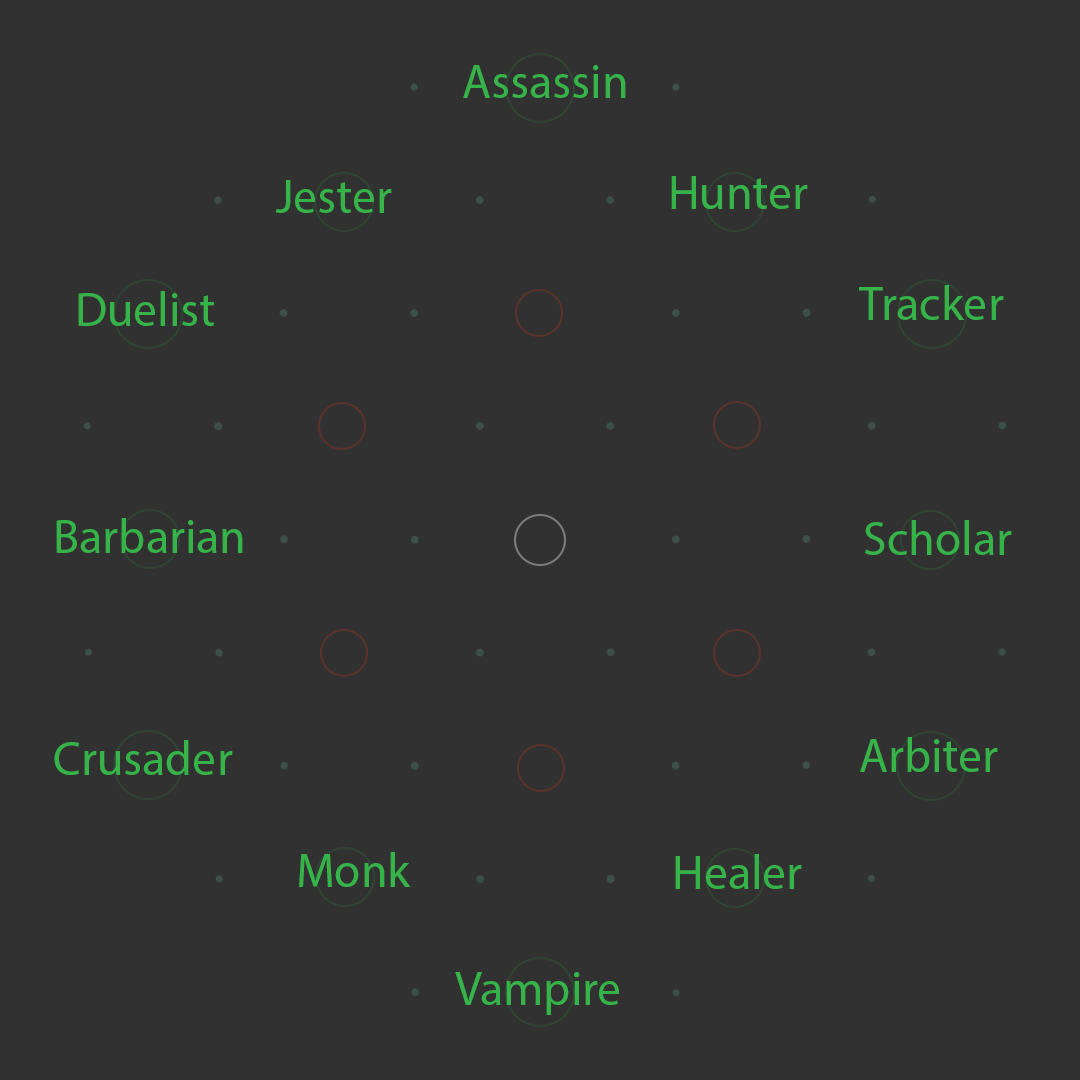
<style>
.page{position:relative;width:1080px;height:1080px;background:#313131}
.page>*{position:absolute;margin:0}
.t1{font:48px "MyriadPro-Regular";color:#36b44a}
</style>
<div class="page">
<p class="t1" style="left:463px;top:65px;width:163px;height:33px">Assassin</p>
<p class="t1" style="left:276px;top:180px;width:116px;height:33px">Jester</p>
<p class="t1" style="left:671px;top:176px;width:137px;height:33px">Hunter</p>
<p class="t1" style="left:78px;top:291px;width:136px;height:35px">Duelist</p>
<p class="t1" style="left:859px;top:285px;width:145px;height:35px">Tracker</p>
<p class="t1" style="left:56px;top:518px;width:187px;height:35px">Barbarian</p>
<p class="t1" style="left:865px;top:520px;width:147px;height:35px">Scholar</p>
<p class="t1" style="left:860px;top:737px;width:138px;height:35px">Arbiter</p>
<p class="t1" style="left:54px;top:740px;width:179px;height:35px">Crusader</p>
<p class="t1" style="left:299px;top:852px;width:112px;height:35px">Monk</p>
<p class="t1" style="left:675px;top:854px;width:127px;height:35px">Healer</p>
<p class="t1" style="left:455px;top:972px;width:164px;height:43px">Vampire</p>
</div>
